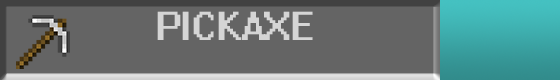
<style>
.page{position:relative;width:560px;height:80px;background:#646464}
.page>*{position:absolute;margin:0}
.t1{font:36px "System";color:#d5d5d5}
</style>
<div class="page">
<p class="t1" style="left:157px;top:11px;width:156px;height:29px">PICKAXE</p>
</div>
